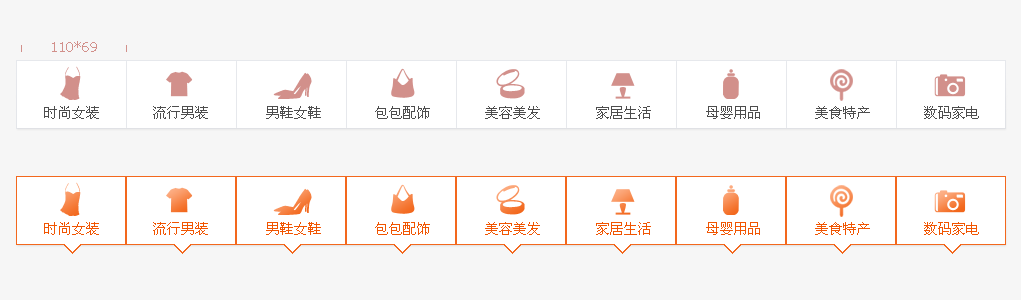
<style>
.page{position:relative;width:1021px;height:300px;background:#f6f6f6}
.page>*{position:absolute;margin:0}
.t1{font:14px "Tahoma";color:#d2908b}
.t2{font:14px "SimSun";color:#4d4d4d}
.t3{font:14px "SimSun";color:#f15501}
</style>
<div class="page">
<p class="t1" style="left:52px;top:41px;width:45px;height:11px">110*69</p>
<p class="t2" style="left:44px;top:106px;width:55px;height:13px">时尚女装</p>
<p class="t2" style="left:153px;top:106px;width:55px;height:13px">流行男装</p>
<p class="t2" style="left:266px;top:106px;width:55px;height:13px">男鞋女鞋</p>
<p class="t2" style="left:375px;top:106px;width:55px;height:13px">包包配饰</p>
<p class="t2" style="left:485px;top:106px;width:55px;height:13px">美容美发</p>
<p class="t2" style="left:596px;top:106px;width:55px;height:13px">家居生活</p>
<p class="t2" style="left:706px;top:106px;width:54px;height:13px">母婴用品</p>
<p class="t2" style="left:815px;top:106px;width:55px;height:13px">美食特产</p>
<p class="t2" style="left:924px;top:106px;width:55px;height:13px">数码家电</p>
<p class="t3" style="left:44px;top:222px;width:55px;height:13px">时尚女装</p>
<p class="t3" style="left:153px;top:222px;width:55px;height:13px">流行男装</p>
<p class="t3" style="left:266px;top:222px;width:55px;height:13px">男鞋女鞋</p>
<p class="t3" style="left:375px;top:222px;width:55px;height:13px">包包配饰</p>
<p class="t3" style="left:485px;top:222px;width:55px;height:13px">美容美发</p>
<p class="t3" style="left:596px;top:222px;width:55px;height:13px">家居生活</p>
<p class="t3" style="left:706px;top:222px;width:54px;height:13px">母婴用品</p>
<p class="t3" style="left:815px;top:222px;width:55px;height:13px">美食特产</p>
<p class="t3" style="left:924px;top:222px;width:55px;height:13px">数码家电</p>
</div>
